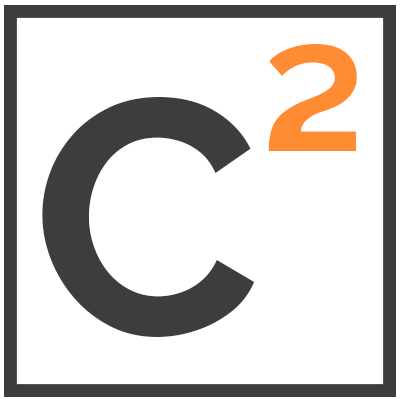
<style>
.page{position:relative;width:400px;height:400px;background:#ffffff}
.page>*{position:absolute;margin:0}
.t1{font:250px "RalewayRoman-Bold";color:#ff8b33}
.t2{font:333.3px "RalewayRoman-Bold";color:#3d3d3d}
</style>
<div class="page">
<p class="t1" style="left:268px;top:44px;width:89px;height:107px">²</p>
<p class="t2" style="left:42px;top:97px;width:213px;height:240px">C</p>
</div>
